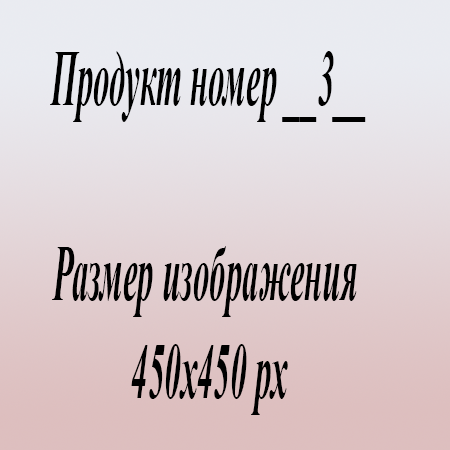
<style>
.page{position:relative;width:450px;height:450px}
.page>*{position:absolute;margin:0}
.t1{font:81.4px "TimesNewRomanPS-BoldItalicMT";color:#000000;scale:0.4 1}
</style>
<div class="page">
<p class="t1" style="left:50px;top:51px;width:316px;height:364px;text-align:center">Продукт номер __3__<br><br>Размер изображения <br>450х450 px</p>
</div>
